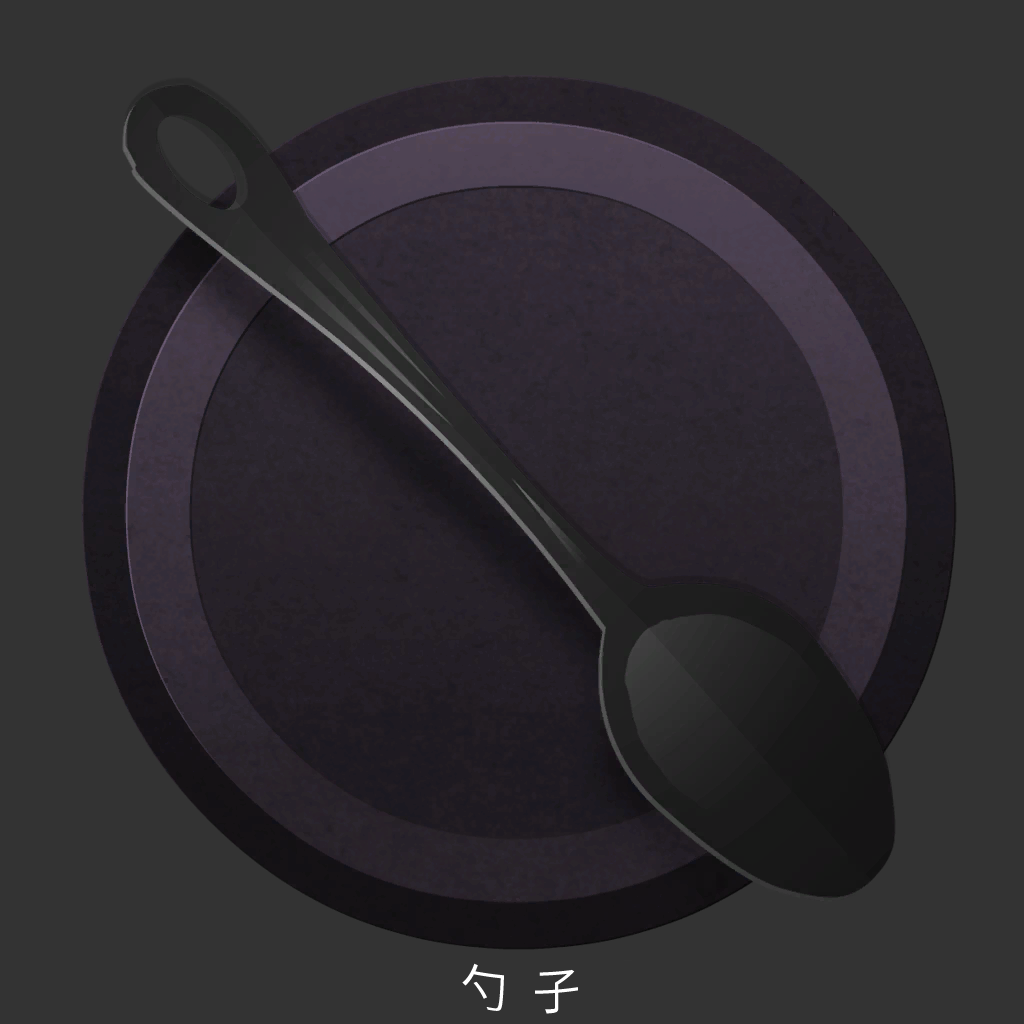
<style>
.page{position:relative;width:1024px;height:1024px;background:#333333}
.page>*{position:absolute;margin:0}
.t1{font:48px "SourceHanSansSC-Normal";letter-spacing:0.5em;color:#ffffff}
</style>
<div class="page">
<p class="t1" style="left:462px;top:963px;width:116px;height:51px">勺子</p>
</div>
